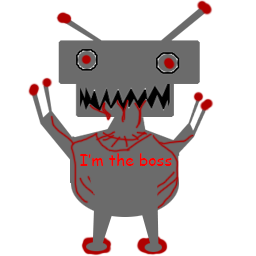
<style>
.page{position:relative;width:256px;height:256px;background:#ffffff}
.page>*{position:absolute;margin:0}
.t1{font:16px "ComicSansMS";color:#ff0000}
</style>
<div class="page">
<p class="t1" style="left:80px;top:153px;width:92px;height:13px">I’m the boss</p>
</div>
